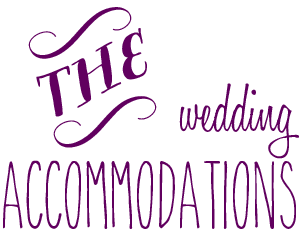
<style>
.page{position:relative;width:300px;height:244px;background:#ffffff}
.page>*{position:absolute;margin:0}
.t1{font:85px "BergamotOrnaments";color:#61005f}
.t2{font:70px "HoneyScript-Light";color:#61005f}
.t3{font:68px "TheSkinny";color:#61005f}
</style>
<div class="page">
<p class="t1" style="left:28px;top:7px;width:129px;height:141px;rotate:-9deg">z</p>
<p class="t2" style="left:179px;top:83px;width:120px;height:76px">wedding</p>
<p class="t3" style="left:3px;top:160px;width:293px;height:69px">Accommodations</p>
</div>
